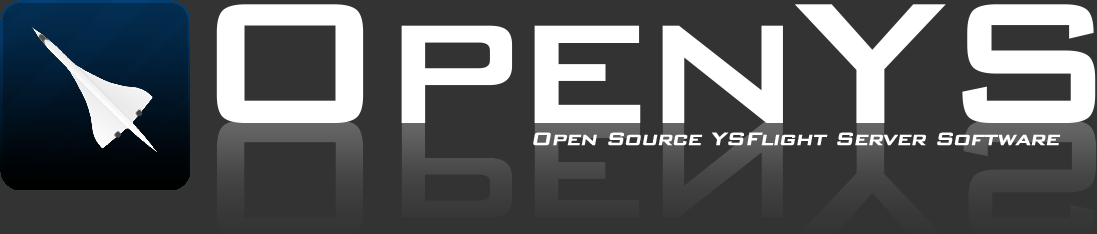
<style>
.page{position:relative;width:1097px;height:234px;background:#333333}
.page>*{position:absolute;margin:0}
.t1{font:230px "BankGothicBold";letter-spacing:-0.05em;color:#ffffff}
.t2{font:24px "BankGothicBold";letter-spacing:-0.05em;color:#ffffff;font-weight:bold;font-style:italic}
</style>
<div class="page">
<p class="t1" style="left:216px;top:4px;width:880px;height:119px">OpenYS</p>
<p class="t2" style="left:533px;top:132px;width:528px;height:14px">Open Source YSFlight Server Software</p>
</div>
